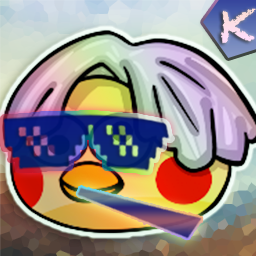
<style>
.page{position:relative;width:256px;height:256px}
.page>*{position:absolute;margin:0}
.t1{font:41.8px "Chalkduster";color:#fedeeb;scale:1.38 1}
</style>
<div class="page">
<p class="t1" style="left:220px;top:8px;width:36px;height:36px">K</p>
</div>
